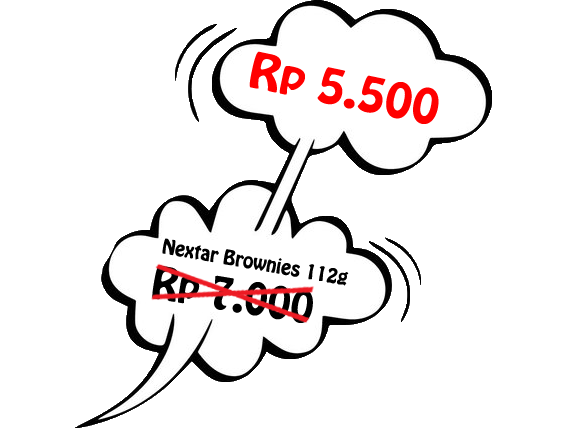
<style>
.page{position:relative;width:570px;height:428px;background:#ffffff}
.page>*{position:absolute;margin:0}
.t1{font:43.6px "HoboStd";color:#ff0000;scale:1.08 1}
.t2{font:18px "HoboStd";color:#000000}
.t3{font:40px "HoboStd";color:#000000}
</style>
<div class="page">
<p class="t1" style="left:249px;top:51px;width:190px;height:73px;rotate:12deg">Rp 5.500</p>
<p class="t2" style="left:162px;top:238px;width:187px;height:48px;rotate:10deg">Nextar Brownies 112g</p>
<p class="t3" style="left:152px;top:265px;width:161px;height:58px;rotate:9deg">Rp 7.000</p>
</div>
